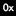
<style>
.page{position:relative;width:16px;height:16px;background:#000000}
.page>*{position:absolute;margin:0}
.t1{font:12px "LiGothicMed";color:#ffffff}
</style>
<div class="page">
<p class="t1" style="left:3px;top:3px;width:11px;height:9px">0x</p>
</div>
